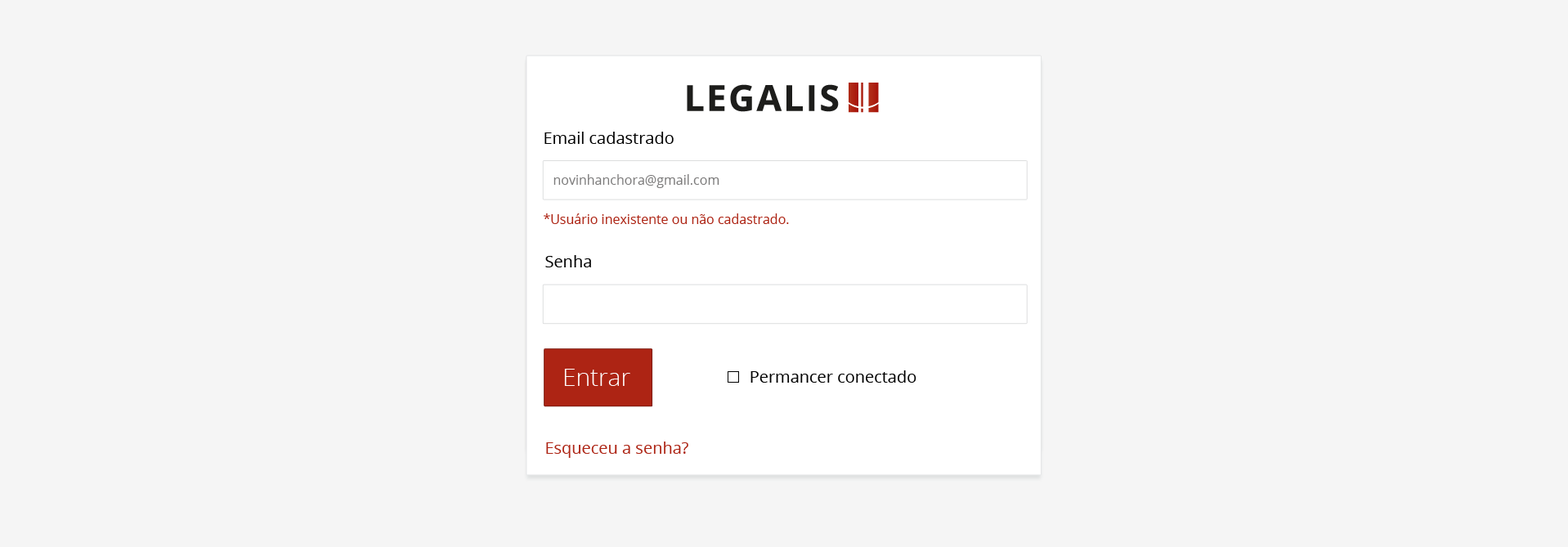
<style>
.page{position:relative;width:1568px;height:547px;background:#f5f5f5}
.page>*{position:absolute;margin:0}
.t1{font:16.4px "OpenSans";color:#000000}
.t2{font:13.1px "OpenSans";color:#7c7b7b}
.t3{font:13.1px "OpenSans";color:#ad2414}
.t4{font:24.5px "OpenSans-Light";color:#ffffff}
.t5{font:16.4px "OpenSans";color:#ad2414}
</style>
<div class="page">
<p class="t1" style="left:544px;top:132px;width:130px;height:12px">Email cadastrado</p>
<p class="t1" style="left:544px;top:132px;width:130px;height:12px">Email cadastrado</p>
<p class="t2" style="left:553px;top:174px;width:166px;height:14px">novinhanchora@gmail.com</p>
<p class="t3" style="left:544px;top:213px;width:245px;height:11px">*Usuário inexistente ou não cadastrado.</p>
<p class="t1" style="left:545px;top:255px;width:46px;height:12px">Senha</p>
<p class="t4" style="left:564px;top:369px;width:66px;height:17px">Entrar</p>
<p class="t1" style="left:750px;top:370px;width:166px;height:13px">Permancer conectado</p>
<p class="t5" style="left:546px;top:441px;width:142px;height:17px">Esqueceu a senha?</p>
</div>
